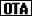
<style>
.page{position:relative;width:32px;height:16px;background:#000000}
.page>*{position:absolute;margin:0}
.t1{font:12.5px "Supertext03Bold";letter-spacing:-0.2em;color:#000000;font-weight:bold}
</style>
<div class="page">
<p class="t1" style="left:4px;top:2px;width:24px;height:13px">OTA</p>
</div>
